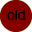
<style>
.page{position:relative;width:32px;height:32px;background:#870000}
.page>*{position:absolute;margin:0}
.t1{font:14px "ArialMT";color:#000000}
</style>
<div class="page">
<p class="t1" style="left:7px;top:10px;width:18px;height:10px">old</p>
</div>
